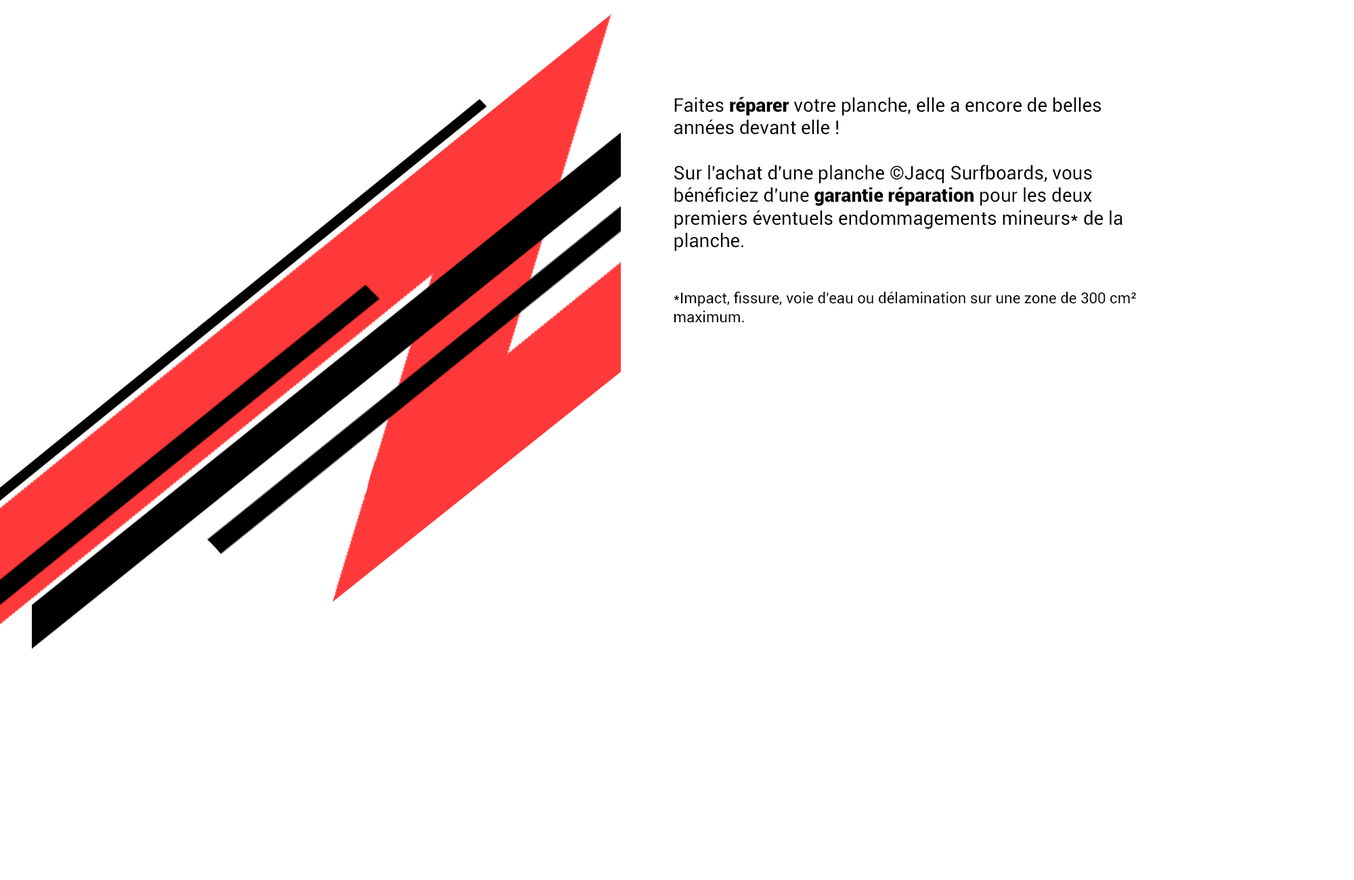
<style>
.page{position:relative;width:1354px;height:880px;background:#ffffff}
.page>*{position:absolute;margin:0}
.t1{font:18.8px/22.6px "Roboto-Regular";color:#000000}
.t2{font:18.8px/22.6px "Roboto-Black";color:#000000}
.t3{font:15px/18.8px "Roboto-Regular";color:#000000}
</style>
<div class="page">
<p class="t1" style="left:674px;top:97px;width:462px;height:226px">Faites <span class="t2">réparer</span> votre planche, elle a encore de belles années devant elle !<br><br>Sur l'achat d'une planche ©Jacq Surfboards, vous bénéficiez d'une <span class="t2">garantie réparation </span>pour les deux premiers éventuels endommagements mineurs* de la planche.<br><br><span class="t3">*Impact, fissure, voie d'eau ou délamination sur une zone de 300 cm² maximum.</span></p>
</div>
